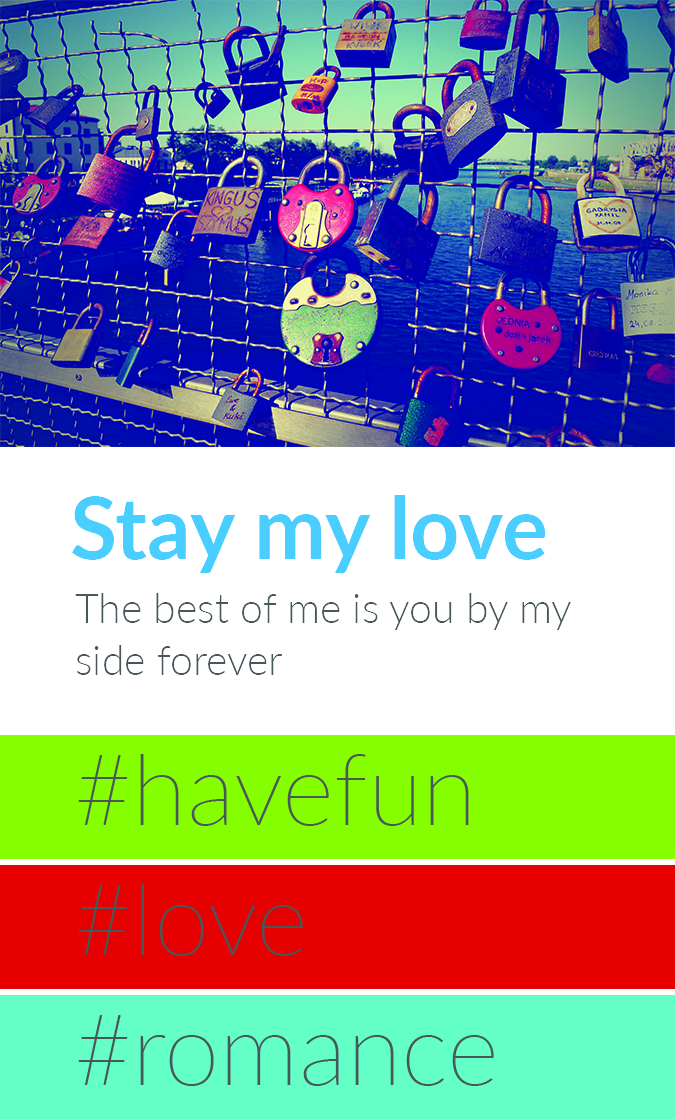
<style>
.page{position:relative;width:675px;height:1119px;background:#ffffff}
.page>*{position:absolute;margin:0}
.t1{font:86px "Lato-Bold";color:#4acdff}
.t2{font:41px/52px "Lato-Light";color:#48585a}
</style>
<div class="page">
<p class="t1" style="left:72px;top:495px;width:474px;height:78px">Stay my love</p>
<p class="t2" style="left:75px;top:593px;width:496px;height:82px;text-align:right">The best of me is you by my side forever</p>
</div>
